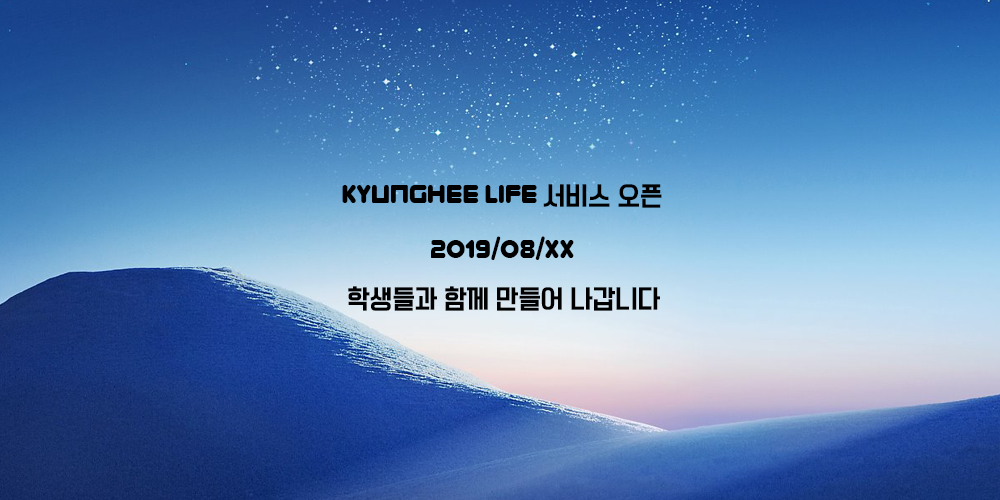
<style>
.page{position:relative;width:1000px;height:500px}
.page>*{position:absolute;margin:0}
.t1{font:25px "Zorque-Regular";color:#000000}
.t2{font:25px "TTManbalchungchunR";color:#000000}
</style>
<div class="page">
<p class="t1" style="left:342px;top:184px;width:320px;height:24px">Kyunghee LIFE <span class="t2">서비스 오픈</span></p>
<p class="t1" style="left:431px;top:236px;width:143px;height:24px">2019/08/xx</p>
<p class="t2" style="left:348px;top:286px;width:312px;height:25px"><span class="t1"> </span>학생들과 함께 만들어 나갑니다</p>
</div>
